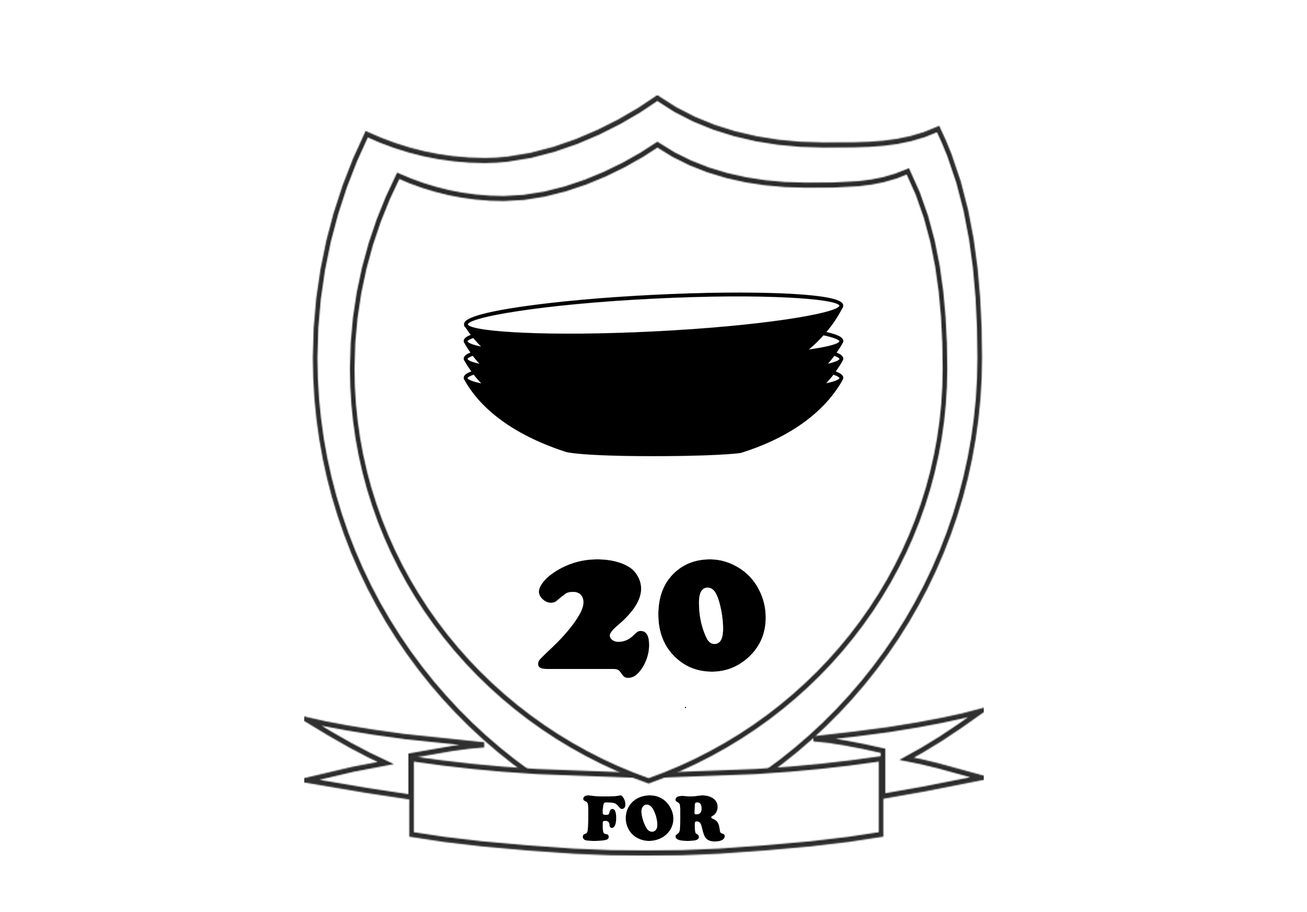
<style>
.page{position:relative;width:1307px;height:912px;background:#ffffff}
.page>*{position:absolute;margin:0}
.t1{font:195.3px "CooperBlack";color:#000000}
.t2{font:65.1px "CooperBlack";color:#000000}
</style>
<div class="page">
<p class="t1" style="left:538px;top:559px;width:228px;height:119px">20</p>
<p class="t2" style="left:583px;top:795px;width:142px;height:46px">FOR</p>
</div>
